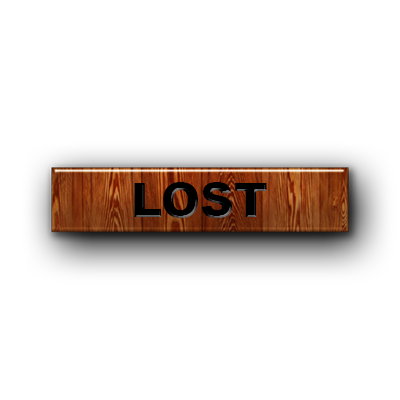
<style>
.page{position:relative;width:400px;height:400px;background:#ffffff}
.page>*{position:absolute;margin:0}
.t1{font:46.9px "Arial-Black";color:#000000}
</style>
<div class="page">
<p class="t1" style="left:134px;top:182px;width:133px;height:36px">LOST</p>
</div>
